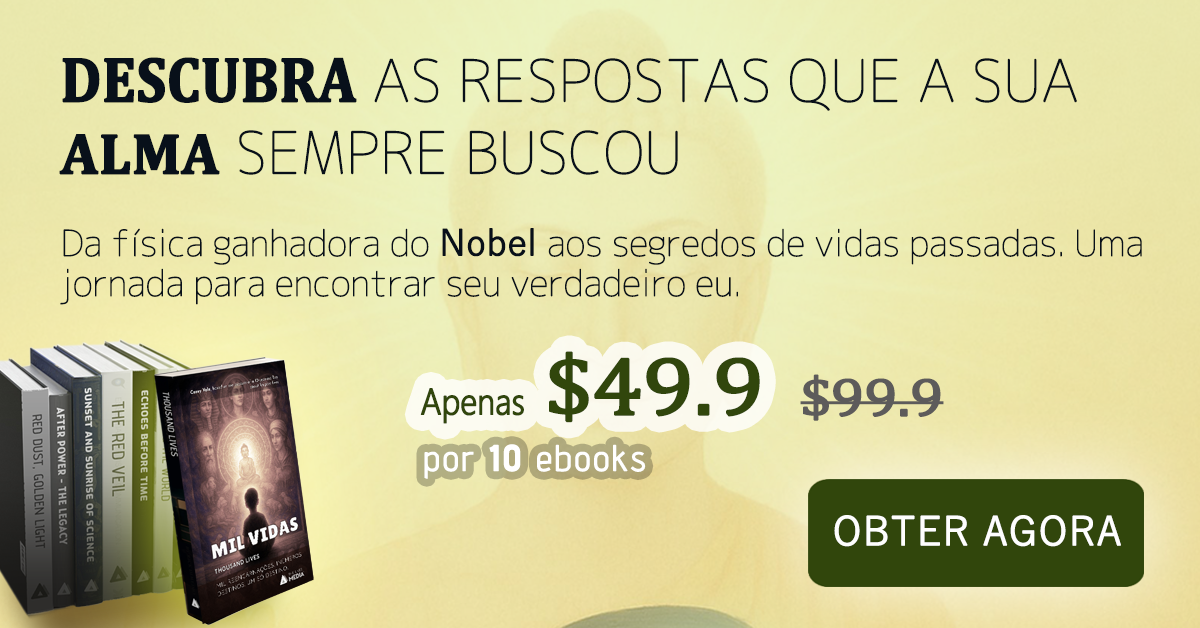
<style>
.page{position:relative;width:1200px;height:628px}
.page>*{position:absolute;margin:0}
.t1{font:57.6px/72px "Chogokuboso-Gothic";letter-spacing:-0.01em;color:#08101a;font-weight:bold}
.t2{font:64px/72px "Cambria-Bold";letter-spacing:-0.01em;color:#08101a;font-weight:bold;scale:0.9 1}
.t3{font:57.6px/72px "Cambria-Bold";letter-spacing:-0.01em;color:#08101a;font-weight:bold}
.t4{font:36px/40px "Chogokuboso-Gothic";letter-spacing:-0.025em;color:#08101a;font-weight:bold}
.t5{font:36px/40px "YuGothic-Regular";letter-spacing:-0.025em;color:#08101a;font-weight:bold}
.t6{font:36px "MalgunGothic-Semilight";letter-spacing:-0.025em;color:#31460c;font-weight:bold;scale:0.89 1}
.t7{font:82.8px "Cambria";letter-spacing:-0.025em;color:#31460c;font-weight:bold;scale:1.11 1}
.t8{font:54px "Cambria";letter-spacing:-0.025em;color:#5d5b5b;font-weight:bold;scale:1.11 1}
.t9{font:36px "AdventPro-Regular";letter-spacing:0.05em;color:#ffffff;font-weight:bold}
.t10{font:36px "AdventPro-Bold";letter-spacing:0.05em;color:#ffffff;font-weight:bold}
.t11{font:39.6px "YuGothic-Regular";color:#fefefe;font-weight:bold}
</style>
<div class="page">
<p class="t1" style="left:59px;top:57px;width:1018px;height:118px"><span class="t2">DESCUBRA </span>AS RESPOSTAS QUE A SUA <span class="t3">ALMA</span> SEMPRE BUSCOU</p>
<p class="t4" style="left:60px;top:228px;width:1082px;height:77px">Da física ganhadora do <span class="t5">Nobel </span>aos segredos de vidas passadas. Uma jornada para encontrar seu verdadeiro eu.</p>
<p class="t6" style="left:420px;top:351px;width:340px;height:73px">Apenas<span class="t7"> $49.9</span></p>
<p class="t8" style="left:800px;top:374px;width:144px;height:47px">$99.9</p>
<p class="t9" style="left:424px;top:444px;width:222px;height:35px">por <span class="t10">10</span> ebooks</p>
<p class="t11" style="left:834px;top:515px;width:287px;height:32px">OBTER AGORA</p>
</div>
